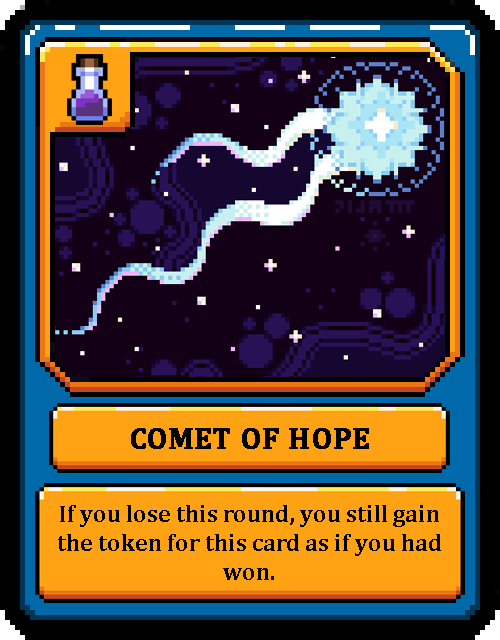
<style>
.page{position:relative;width:500px;height:640px;background:#000000}
.page>*{position:absolute;margin:0}
.t1{font:30px "Cambria-Bold";color:#000000;text-transform:uppercase;font-weight:bold}
.t2{font:24px "Cambria-Bold";color:#000000}
</style>
<div class="page">
<p class="t1" style="left:131px;top:428px;width:238px;height:21px">Comet of Hope</p>
<p class="t2" style="left:58px;top:505px;width:383px;height:75px;text-align:center">If you lose this round, you still gain the token for this card as if you had won.</p>
</div>
